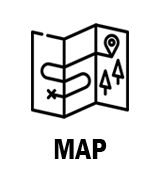
<style>
.page{position:relative;width:160px;height:180px;background:#ffffff}
.page>*{position:absolute;margin:0}
.t1{font:30px "FranklinGothic-DemiCond";color:#000000}
</style>
<div class="page">
<p class="t1" style="left:54px;top:139px;width:53px;height:20px">MAP</p>
</div>
